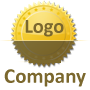
<style>
.page{position:relative;width:90px;height:90px;background:#ffffff}
.page>*{position:absolute;margin:0}
.t1{font:20.3px "Calibri-Bold";color:#7b682e}
.t2{font:21px "Calibri-Bold";color:#7b682e}
</style>
<div class="page">
<p class="t1" style="left:25px;top:20px;width:39px;height:17px">Logo</p>
<p class="t2" style="left:4px;top:69px;width:82px;height:18px">Company</p>
</div>
